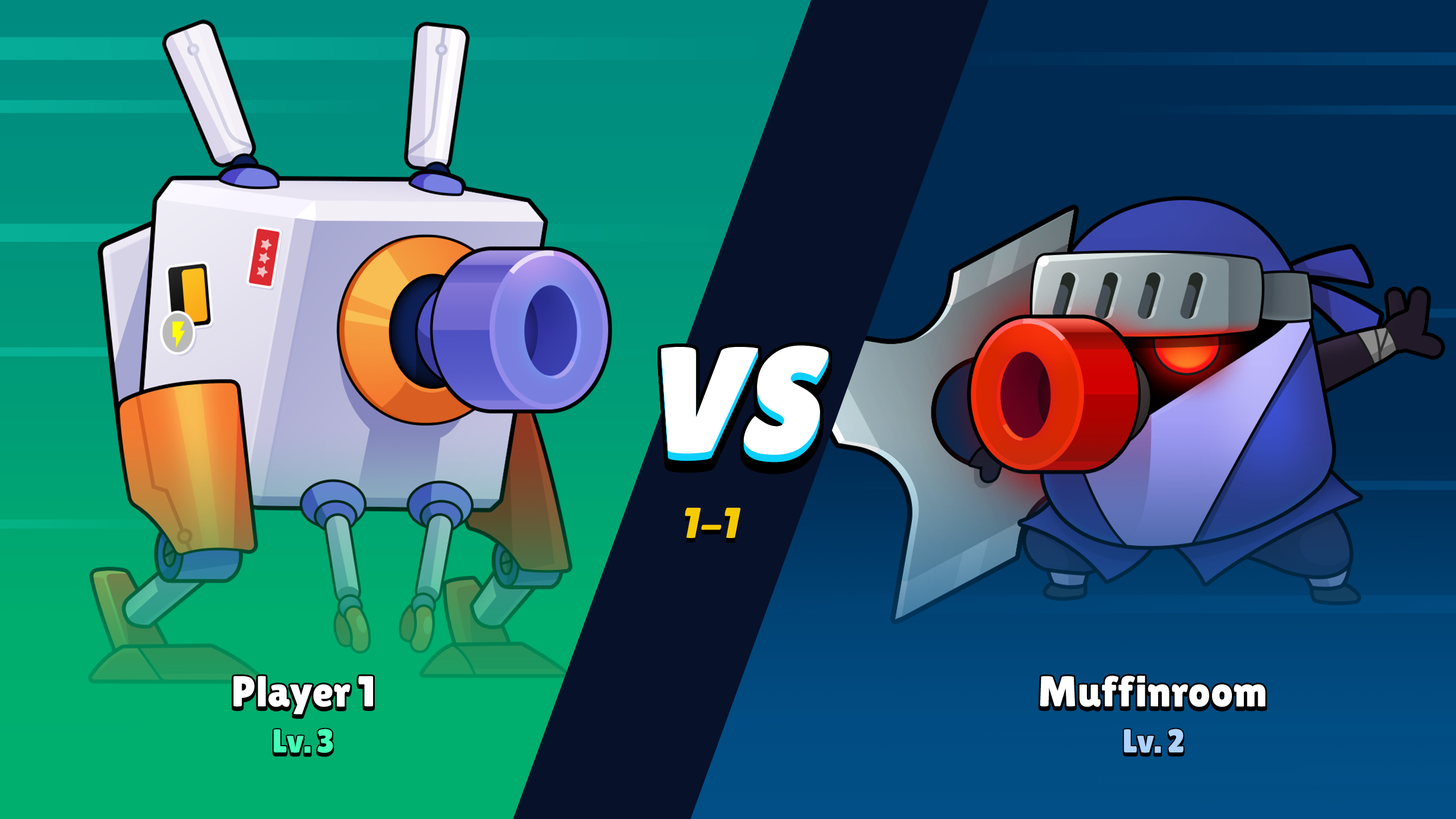
<style>
.page{position:relative;width:1456px;height:819px}
.page>*{position:absolute;margin:0}
.t1{font:151.7px "LilitaOne";color:#ffffff;text-transform:uppercase;font-style:italic}
.t2{font:43.2px "LilitaOne";letter-spacing:-0.01em;color:#f6ca03;font-style:italic}
.t3{font:43.2px "LilitaOne";letter-spacing:-0.01em;color:#ffffff}
.t4{font:33px "LilitaOne";letter-spacing:-0.01em;color:#45ffb7}
.t5{font:33px "LilitaOne";letter-spacing:-0.01em;color:#aed3ff}
</style>
<div class="page">
<p class="t1" style="left:661px;top:353px;width:168px;height:109px">VS</p>
<p class="t1" style="left:661px;top:352px;width:168px;height:110px">VS</p>
<p class="t1" style="left:661px;top:351px;width:168px;height:110px">VS</p>
<p class="t1" style="left:661px;top:350px;width:168px;height:110px">VS</p>
<p class="t1" style="left:661px;top:350px;width:168px;height:110px">VS</p>
<p class="t1" style="left:661px;top:349px;width:168px;height:110px">VS</p>
<p class="t1" style="left:661px;top:348px;width:168px;height:110px">VS</p>
<p class="t1" style="left:661px;top:348px;width:168px;height:109px">VS</p>
<p class="t1" style="left:661px;top:347px;width:168px;height:110px">VS</p>
<p class="t1" style="left:661px;top:345px;width:168px;height:110px">VS</p>
<p class="t2" style="left:685px;top:507px;width:56px;height:31px">1-1</p>
<p class="t3" style="left:233px;top:676px;width:140px;height:38px">Player 1</p>
<p class="t3" style="left:1040px;top:676px;width:225px;height:31px">Muffinroom</p>
<p class="t4" style="left:274px;top:729px;width:59px;height:24px">Lv. 3</p>
<p class="t5" style="left:1124px;top:729px;width:60px;height:24px">Lv. 2</p>
</div>
